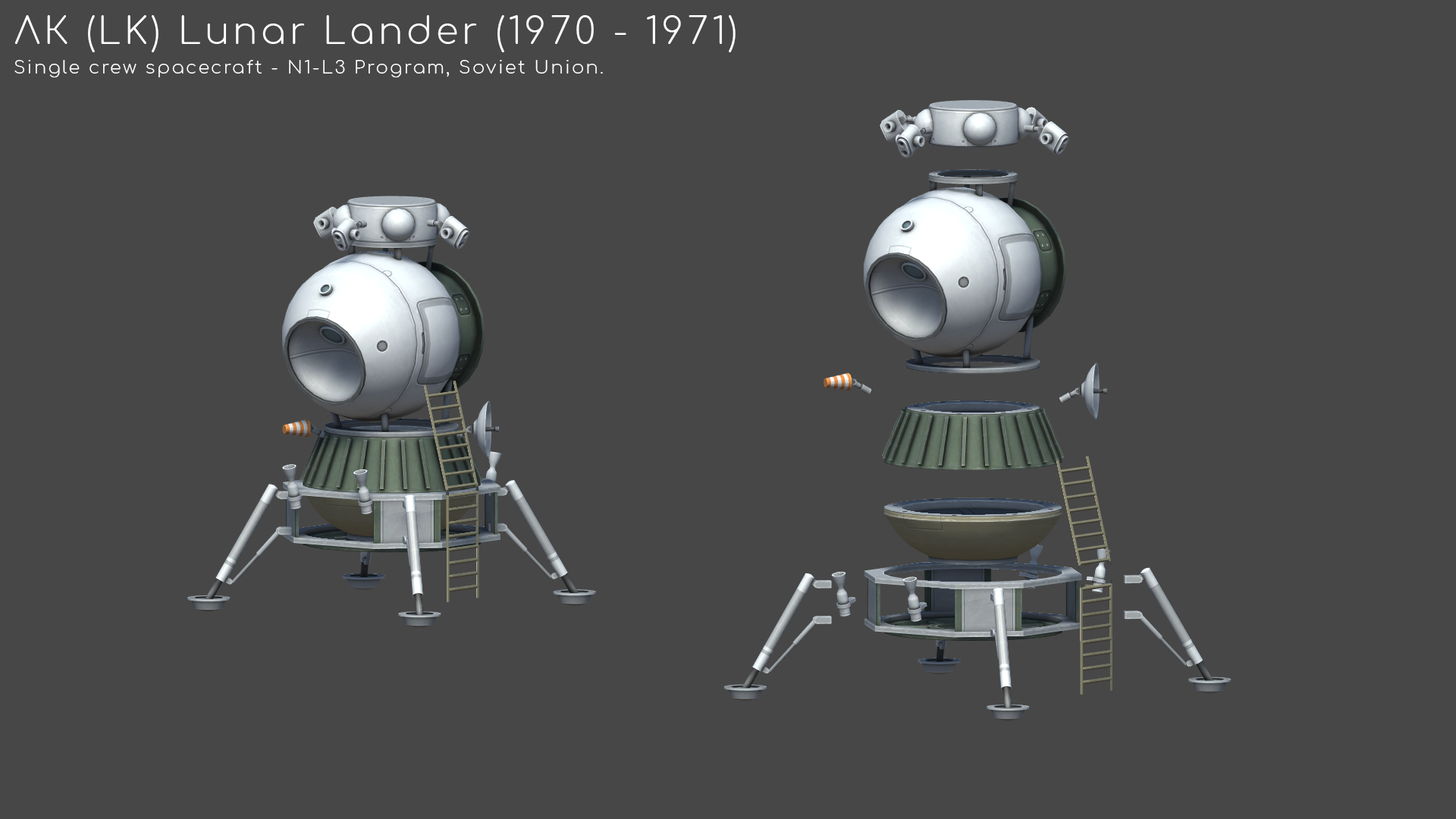
<style>
.page{position:relative;width:1456px;height:819px;background:#474747}
.page>*{position:absolute;margin:0}
.t1{font:36.4px "Comfortaa-Light";letter-spacing:0.1em;color:#ffffff}
.t2{font:18.2px "Comfortaa-Light";letter-spacing:0.1em;color:#ffffff}
</style>
<div class="page">
<p class="t1" style="left:14px;top:15px;width:722px;height:37px">ЛК (LK) Lunar Lander (1970 - 1971)</p>
<p class="t2" style="left:14px;top:60px;width:589px;height:18px">Single crew spacecraft - N1-L3 Program, Soviet Union.</p>
</div>
